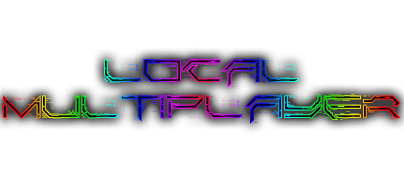
<style>
.page{position:relative;width:404px;height:182px;background:#ffffff}
.page>*{position:absolute;margin:0}
.t1{font:30px "Corruptor-LDR"}
</style>
<div class="page">
<p class="t1" style="left:3px;top:58px;width:398px;height:66px;text-align:center">LOCAL<br>MULTIPLAYER</p>
</div>
